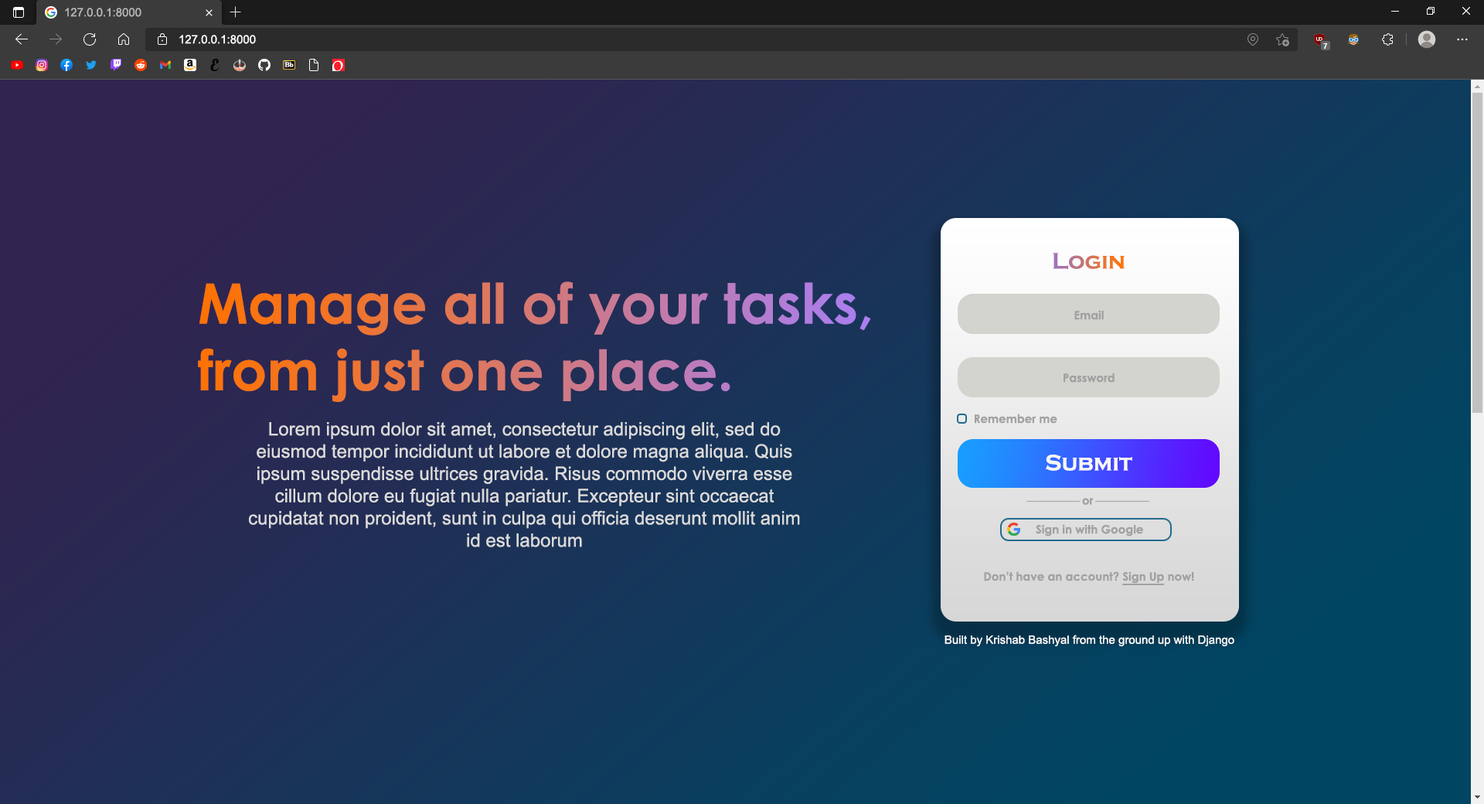
<style>
.page{position:relative;width:1484px;height:804px}
.page>*{position:absolute;margin:0}
.t1{font:11.6px "ArialMT";color:#bababa}
.t2{font:11.6px "ArialMT";color:#ffffff}
.t3{font:23.2px "CopperplateGothic-Bold"}
.t4{font:55.6px "CenturyGothic-Bold"}
.t5{font:11.6px "CenturyGothic-Bold";color:#a1a1a1}
.t6{font:18.5px "ArialMT";color:#dbdbdb}
.t7{font:23.2px "CopperplateGothic-Bold";color:#f6f6f6}
</style>
<div class="page">
<p class="t1" style="left:65px;top:8px;width:76px;height:9px">127.0.0.1:8000</p>
<p class="t2" style="left:179px;top:35px;width:77px;height:9px">127.0.0.1:8000</p>
<p class="t3" style="left:1053px;top:253px;width:71px;height:17px">Login</p>
<p class="t4" style="left:198px;top:281px;width:673px;height:121px">Manage all of your tasks,<br>from just one place.</p>
<p class="t5" style="left:1074px;top:310px;width:30px;height:10px">Email</p>
<p class="t5" style="left:1063px;top:372px;width:51px;height:11px">Password</p>
<p class="t5" style="left:974px;top:413px;width:83px;height:10px">Remember me</p>
<p class="t6" style="left:249px;top:422px;width:551px;height:125px;text-align:center">Lorem ipsum dolor sit amet, consectetur adipiscing elit, sed do eiusmod tempor incididunt ut labore et dolore magna aliqua. Quis ipsum suspendisse ultrices gravida. Risus commodo viverra esse cillum dolore eu fugiat nulla pariatur. Excepteur sint occaecat cupidatat non proident, sunt in culpa qui officia deserunt mollit anim id est laborum</p>
<p class="t7" style="left:1046px;top:454px;width:86px;height:17px">Submit</p>
<p class="t5" style="left:1082px;top:498px;width:11px;height:7px">or</p>
<p class="t5" style="left:1036px;top:524px;width:107px;height:12px">Sign in with Google</p>
<p class="t5" style="left:984px;top:571px;width:210px;height:12px">Don’t have an account? Sign Up now!</p>
<p class="t2" style="left:944px;top:634px;width:290px;height:12px">Built by Krishab Bashyal from the ground up with Django</p>
</div>
